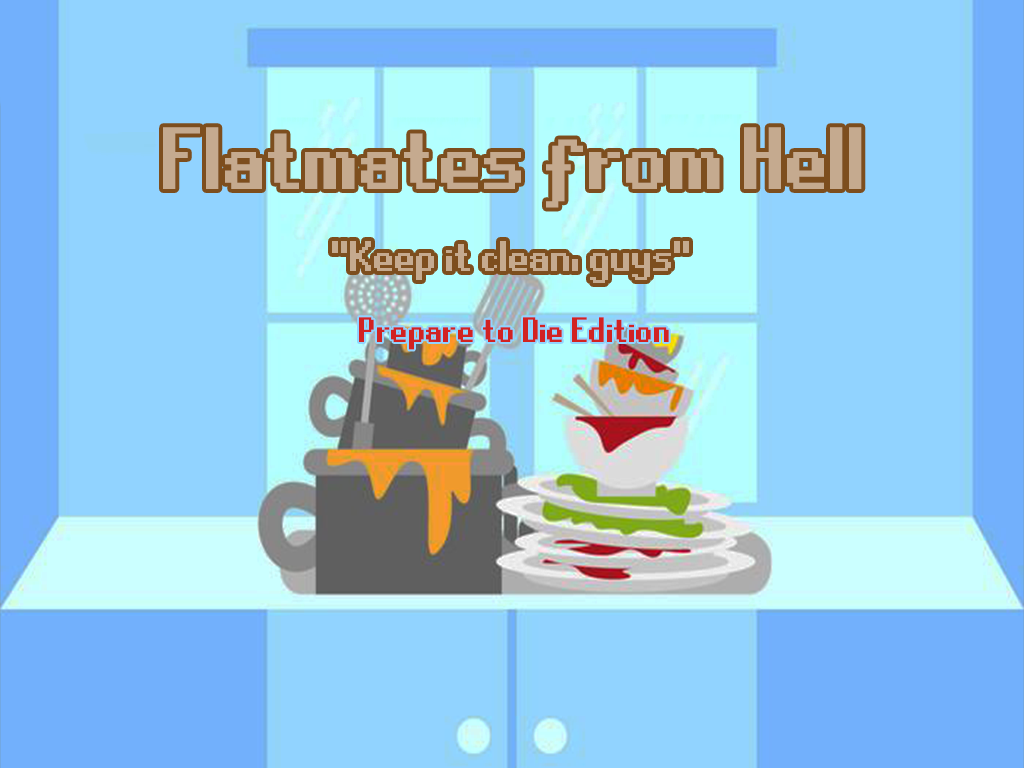
<style>
.page{position:relative;width:1024px;height:768px;background:#91d3ff}
.page>*{position:absolute;margin:0}
.t1{font:98.8px "RuneScape-UF";color:#c5aa8f}
.t2{font:48px "RuneScape-UF";color:#c5aa8f}
.t3{font:39.6px "RuneScape-UF";color:#d22222}
</style>
<div class="page">
<p class="t1" style="left:163px;top:127px;width:699px;height:81px">Flatmates from Hell</p>
<p class="t2" style="left:332px;top:241px;width:357px;height:42px">"Keep it clean, guys"</p>
<p class="t3" style="left:359px;top:317px;width:310px;height:33px">Prepare to Die Edition</p>
</div>
